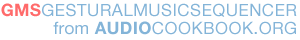
<style>
.page{position:relative;width:300px;height:40px;background:#ffffff}
.page>*{position:absolute;margin:0}
.t1{font:17px/18px "HelveticaNeue";letter-spacing:0.025em;color:#83b4d8}
.t2{font:17px/18px "HelveticaNeue-Bold";letter-spacing:0.025em;color:#ff6b6b}
.t3{font:17px/18px "HelveticaNeue-Bold";letter-spacing:0.025em;color:#83b4d8}
</style>
<div class="page">
<p class="t1" style="left:1px;top:3px;width:296px;height:32px;text-align:right"><span class="t2">GMS</span>GESTURALMUSICSEQUENCER<br>from <span class="t3">AUDIO</span>COOKBOOK.ORG</p>
</div>
